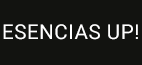
<style>
.page{position:relative;width:142px;height:65px;background:#121310}
.page>*{position:absolute;margin:0}
.t1{font:20.6px "Roboto-Regular";letter-spacing:0.025em;color:#ffffff}
</style>
<div class="page">
<p class="t1" style="left:3px;top:24px;width:135px;height:16px">ESENCIAS UP!</p>
</div>
